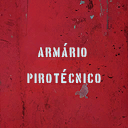
<style>
.page{position:relative;width:128px;height:128px}
.page>*{position:absolute;margin:0}
.t1{font:10.8px/26px "BostonTraffic";letter-spacing:0.11em;color:#d0f0f8}
.t2{font:18.6px "ArialMT";letter-spacing:0.11em;color:#d0f0f8}
</style>
<div class="page">
<p class="t1" style="left:27px;top:47px;width:74px;height:37px;text-align:center">armario <br>pirotecnico</p>
<p class="t2" style="left:64px;top:43px;width:4px;height:3px">´</p>
<p class="t2" style="left:63px;top:69px;width:4px;height:3px">´</p>
</div>
